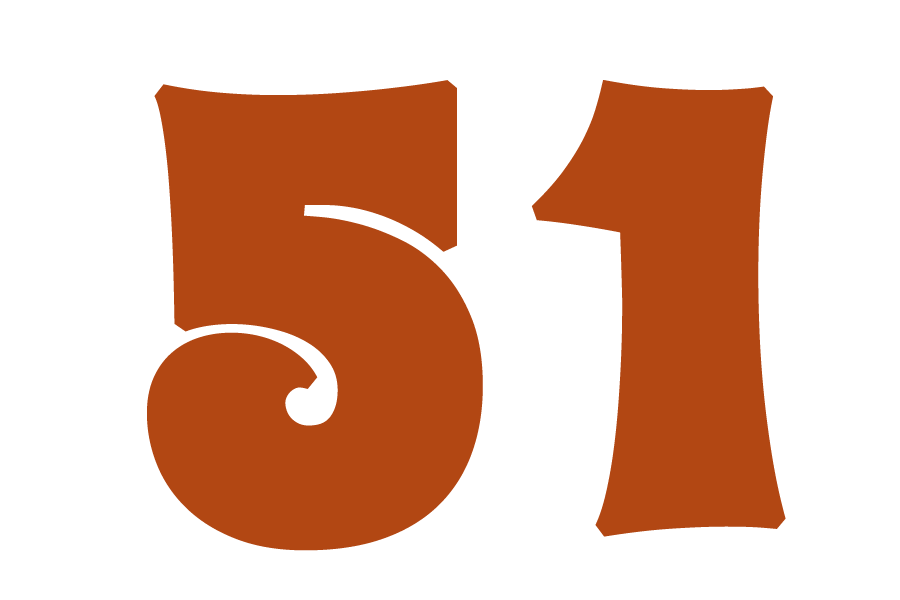
<style>
.page{position:relative;width:900px;height:600px;background:#ffffff}
.page>*{position:absolute;margin:0}
.t1{font:607.5px "SpicyRice-Regular";letter-spacing:0.06em;color:#b24713;font-weight:bold}
</style>
<div class="page">
<p class="t1" style="left:147px;top:80px;width:639px;height:471px">51</p>
</div>
